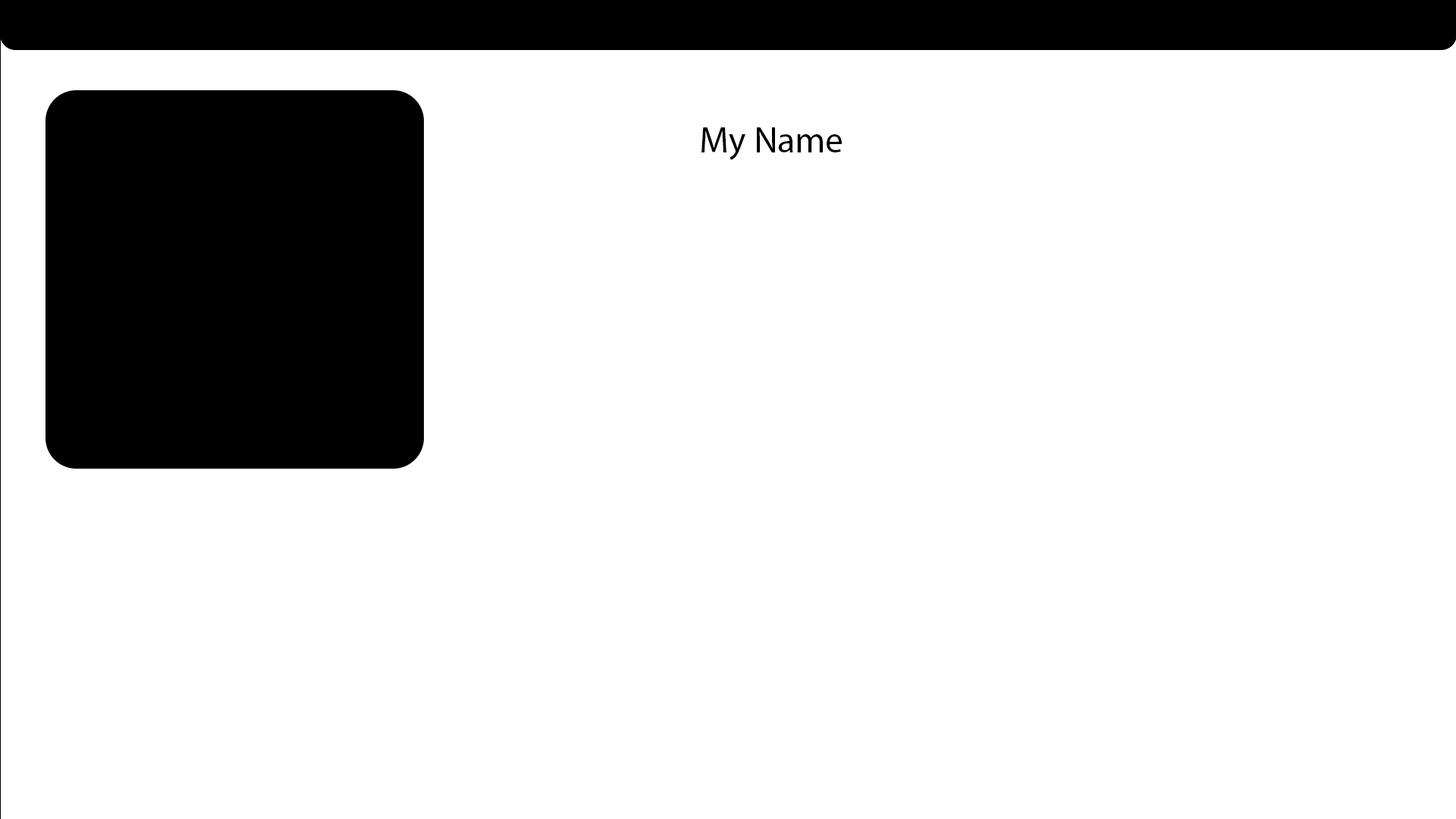
<style>
.page{position:relative;width:1456px;height:819px;background:#ffffff}
.page>*{position:absolute;margin:0}
.t1{font:36.4px "MyriadPro-Regular";color:#000000}
</style>
<div class="page">
<p class="t1" style="left:701px;top:127px;width:141px;height:33px">My Name</p>
</div>
